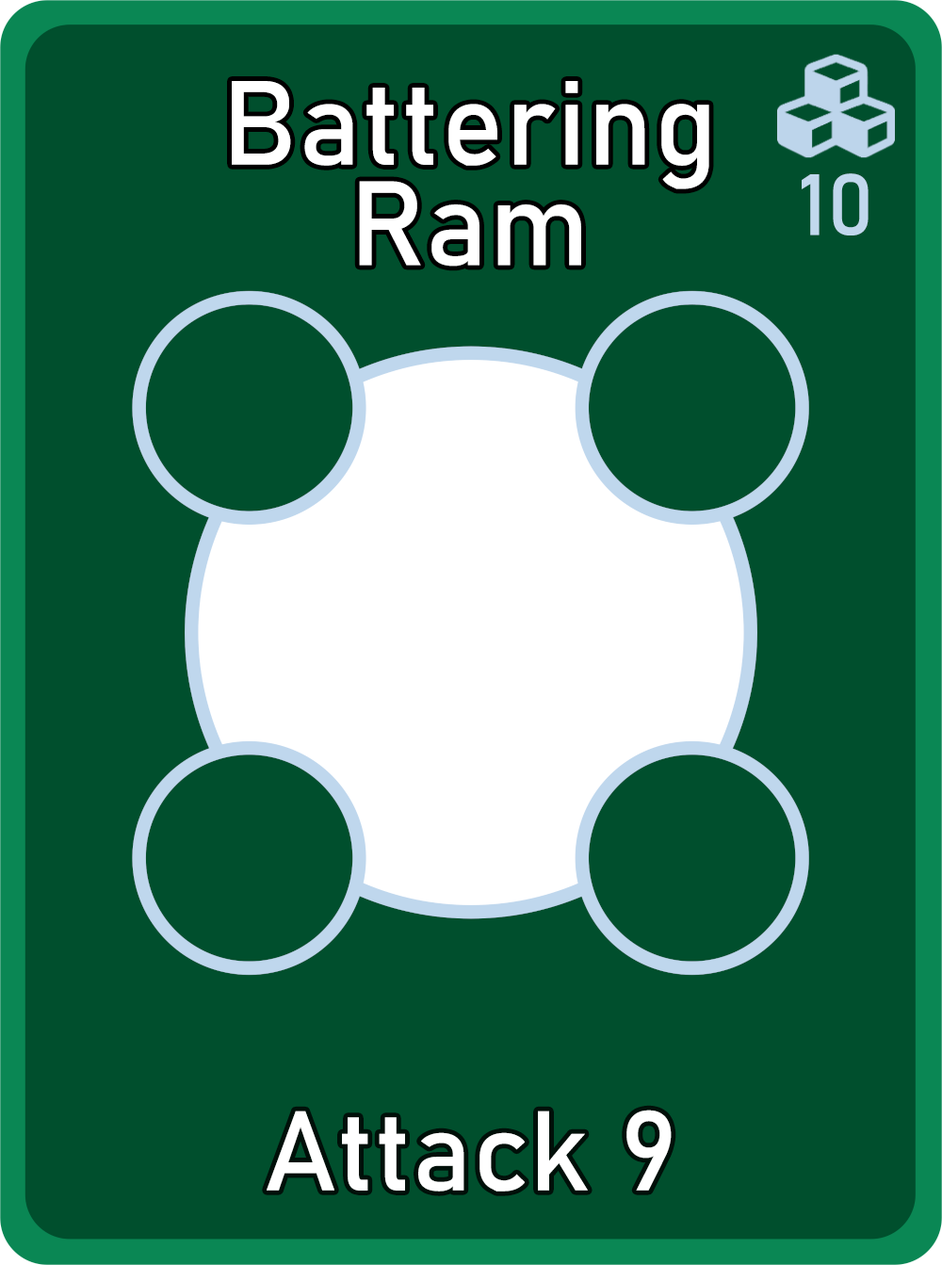
<style>
.page{position:relative;width:942px;height:1265px;background:#004f2d}
.page>*{position:absolute;margin:0}
.t1{font:117.5px/100.5px "Bahnschrift";letter-spacing:0.01em;color:#ffffff}
.t2{font:85px "Bahnschrift";letter-spacing:0.01em;color:#c1d8ed}
.t3{font:111.3px "Bahnschrift";letter-spacing:0.01em;color:#ffffff}
</style>
<div class="page">
<p class="t1" style="left:232px;top:81px;width:478px;height:186px;text-align:center">Battering<br>Ram</p>
<p class="t2" style="left:802px;top:173px;width:67px;height:63px">10</p>
<p class="t3" style="left:267px;top:1110px;width:405px;height:82px">Attack 9</p>
</div>
